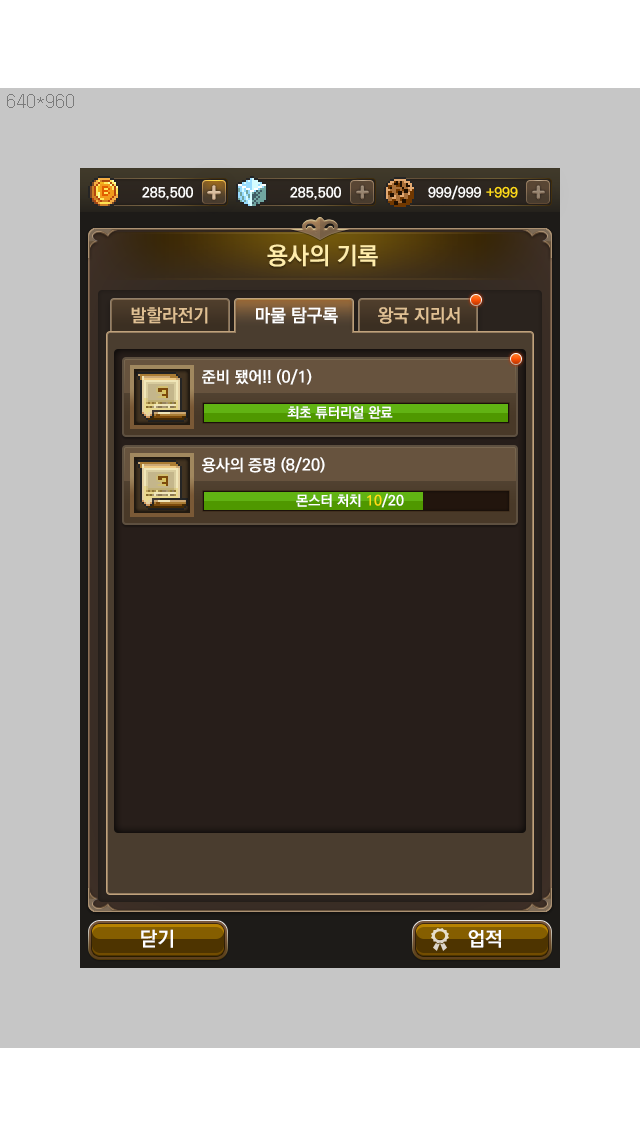
<style>
.page{position:relative;width:640px;height:1136px;background:#c6c6c6}
.page>*{position:absolute;margin:0}
.t1{font:24px "KoPubDotumBold";color:#ffedab}
.t2{font:18px "KoPubDotumBold";color:#e0c093}
.t3{font:18px "KoPubDotumBold";color:#ffffff}
.t4{font:16px "KoPubDotumBold";color:#ffffff}
.t5{font:16px "KoPubDotumBold";color:#fe770c}
.t6{font:14px "KoPubDotumBold";color:#ffffff}
.t7{font:14px "KoPubDotumBold";color:#ffdc18}
.t8{font:20px "KoPubDotumBold";color:#ffffff}
.t9{font:19.9px "KoPubDotumBold";color:#ffffff}
</style>
<div class="page">
<p class="t1" style="left:267px;top:244px;width:111px;height:23px">용사의 기록</p>
<p class="t2" style="left:131px;top:307px;width:77px;height:17px">발할라전기</p>
<p class="t3" style="left:256px;top:307px;width:82px;height:17px">마물 탐구록</p>
<p class="t2" style="left:378px;top:307px;width:82px;height:17px">왕국 지리서</p>
<p class="t4" style="left:202px;top:369px;width:110px;height:16px">준비 됐어!! (<span class="t5">0</span>/1)</p>
<p class="t6" style="left:287px;top:406px;width:106px;height:13px">최초 튜터리얼 완료</p>
<p class="t4" style="left:202px;top:457px;width:123px;height:16px">용사의 증명 (8/20)</p>
<p class="t6" style="left:296px;top:494px;width:65px;height:13px">몬스터 처치</p>
<p class="t6" style="left:367px;top:493px;width:37px;height:15px"><span class="t7">10</span>/20</p>
<p class="t8" style="left:141px;top:929px;width:32px;height:19px">닫기</p>
<p class="t9" style="left:468px;top:930px;width:33px;height:18px">업적</p>
</div>
